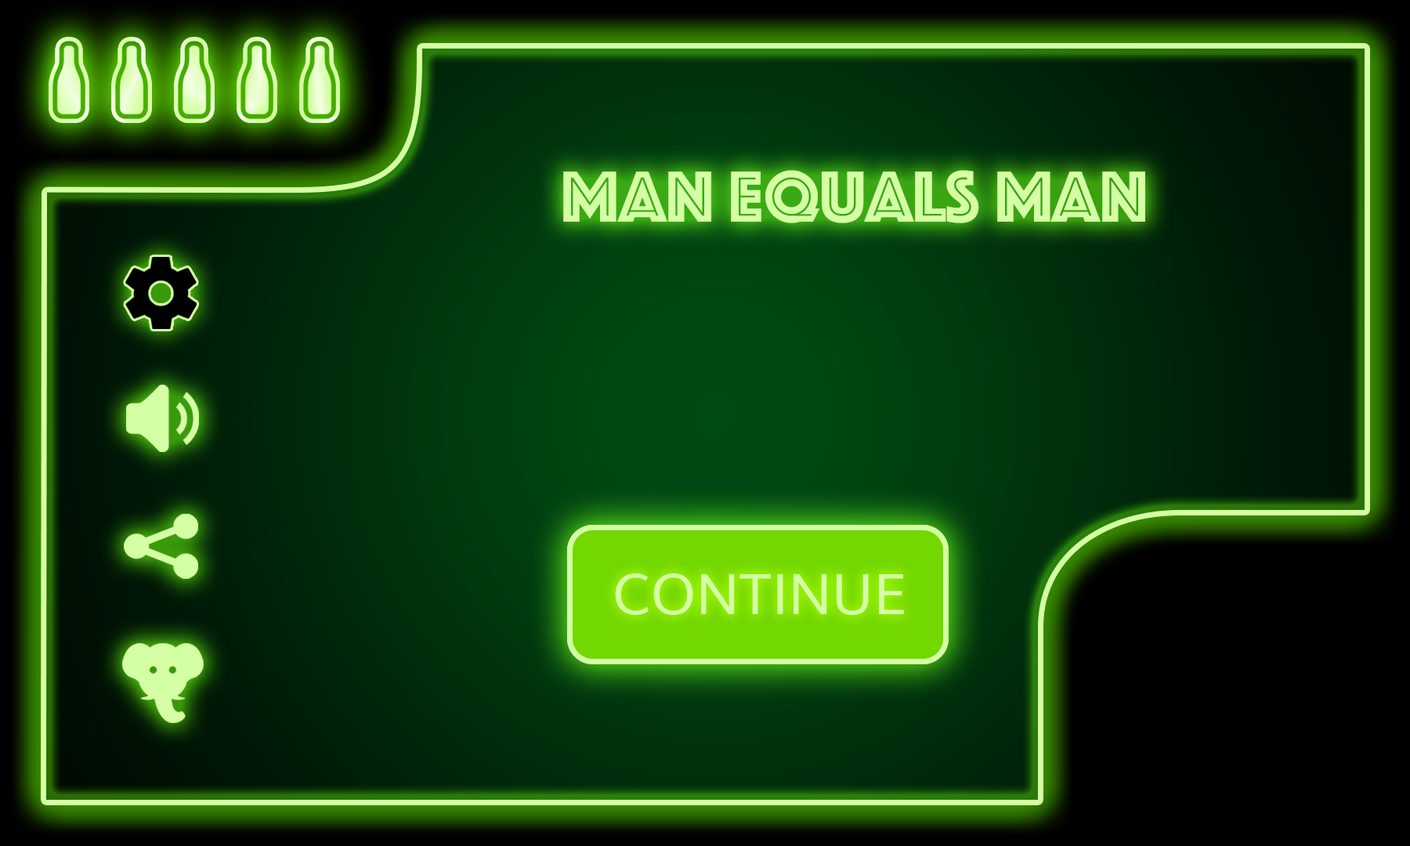
<style>
.page{position:relative;width:1410px;height:846px}
.page>*{position:absolute;margin:0}
.t1{font:75.2px "Phosphate-Inline";color:#d5ffa4}
.t2{font:56.4px "Muli";color:#d5ffa4}
</style>
<div class="page">
<p class="t1" style="left:563px;top:170px;width:582px;height:53px">Man equals man</p>
<p class="t2" style="left:615px;top:573px;width:289px;height:42px">CONTINUE</p>
</div>
